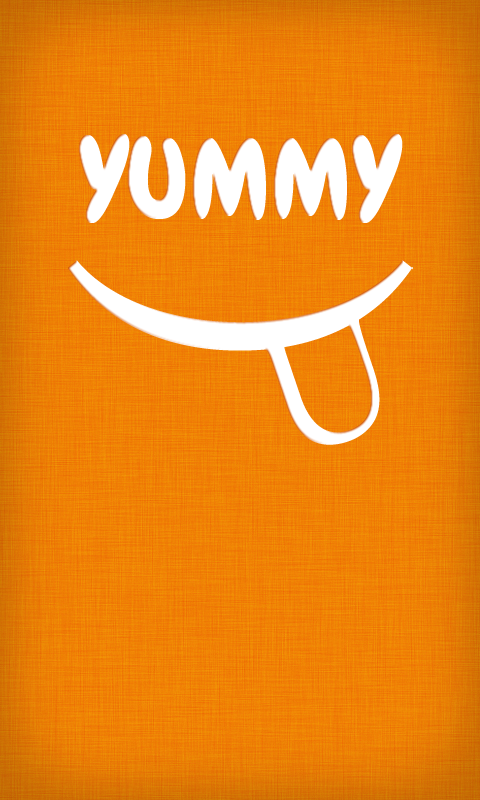
<style>
.page{position:relative;width:480px;height:800px}
.page>*{position:absolute;margin:0}
.t1{font:109px "Chewy";color:#ffffff}
</style>
<div class="page">
<p class="t1" style="left:79px;top:134px;width:324px;height:89px">YUMMY</p>
</div>
